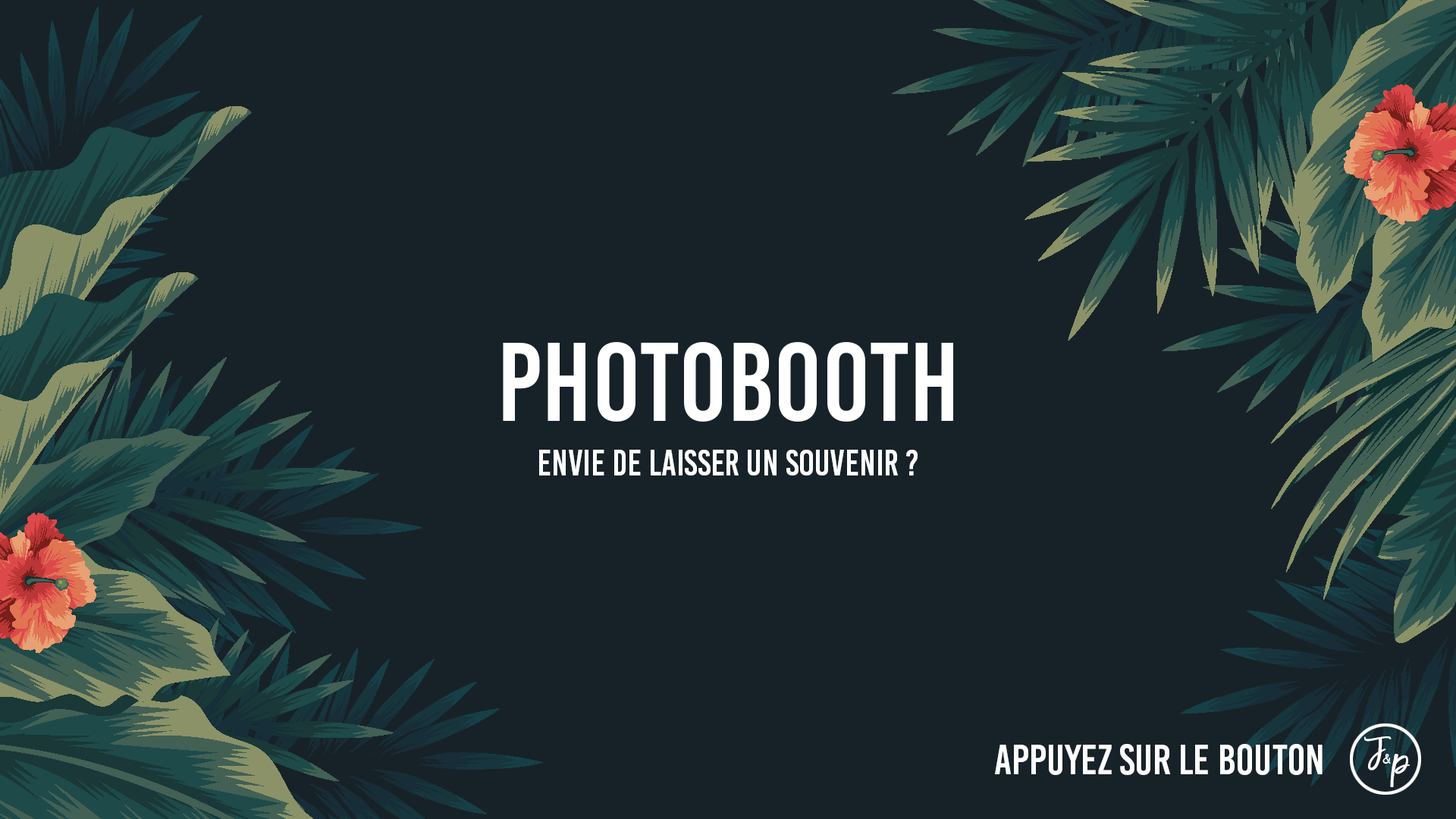
<style>
.page{position:relative;width:1456px;height:819px;background:#172228}
.page>*{position:absolute;margin:0}
.t1{font:36.4px "BebasKai";color:#ffffff}
.t2{font:26.3px "MadinaClean";color:#ffffff;font-weight:bold}
.t3{font:42.5px "BebasKai";color:#ffffff}
.t4{font:13.2px "ComicSansMS";letter-spacing:-0.02em;color:#ffffff}
</style>
<div class="page">
<p class="t1" style="left:539px;top:450px;width:379px;height:25px">envie de laisser un souvenir ?</p>
<p class="t2" style="left:1364px;top:736px;width:28px;height:34px;rotate:-3deg">J</p>
<p class="t3" style="left:995px;top:744px;width:328px;height:31px">appuyez sur le bouton</p>
<p class="t4" style="left:1382px;top:754px;width:9px;height:10px">&amp;</p>
<p class="t2" style="left:1390px;top:754px;width:20px;height:33px;rotate:-3deg">P</p>
</div>
